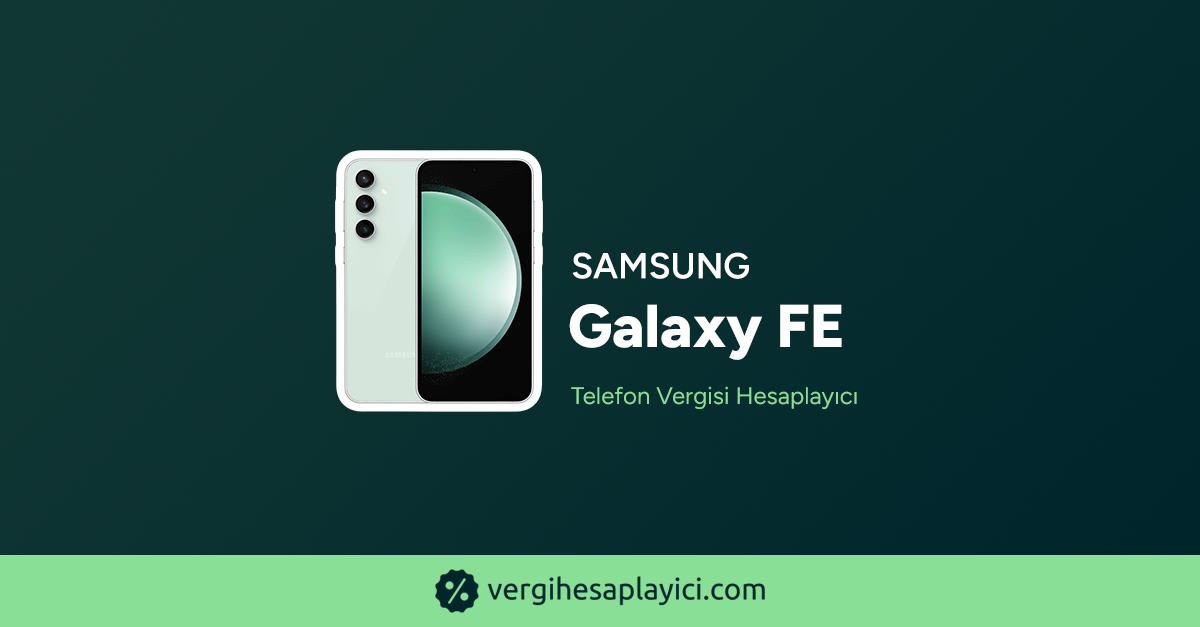
<style>
.page{position:relative;width:1200px;height:627px}
.page>*{position:absolute;margin:0}
.t1{font:36px "Figtree-SemiBold";color:#ffffff;text-transform:uppercase;font-weight:bold}
.t2{font:60.3px "Figtree-ExtraBold";color:#ffffff;font-weight:bold}
.t3{font:24px "Figtree-Regular";color:#88df95;font-weight:bold}
</style>
<div class="page">
<p class="t1" style="left:572px;top:252px;width:177px;height:27px">Samsung</p>
<p class="t2" style="left:569px;top:304px;width:273px;height:56px">Galaxy FE</p>
<p class="t3" style="left:571px;top:386px;width:286px;height:23px">Telefon Vergisi Hesaplayıcı</p>
</div>
